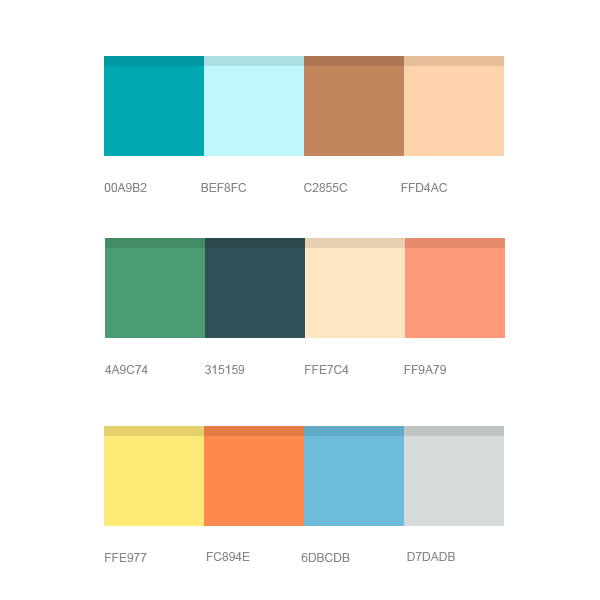
<style>
.page{position:relative;width:600px;height:600px;background:#ffffff}
.page>*{position:absolute;margin:0}
.t1{font:12px "ArialMT";color:#878787;text-transform:uppercase}
</style>
<div class="page">
<p class="t1" style="left:104px;top:183px;width:43px;height:9px">00A9B2</p>
<p class="t1" style="left:201px;top:183px;width:46px;height:9px">BEF8FC</p>
<p class="t1" style="left:304px;top:183px;width:44px;height:9px">c2855c</p>
<p class="t1" style="left:401px;top:183px;width:46px;height:9px">ffd4ac</p>
<p class="t1" style="left:105px;top:365px;width:43px;height:9px">4A9C74</p>
<p class="t1" style="left:205px;top:365px;width:40px;height:9px">315159</p>
<p class="t1" style="left:305px;top:365px;width:44px;height:9px">FFE7C4</p>
<p class="t1" style="left:404px;top:365px;width:42px;height:9px">ff9a79</p>
<p class="t1" style="left:105px;top:553px;width:42px;height:9px">ffe977</p>
<p class="t1" style="left:206px;top:552px;width:44px;height:9px">fc894e</p>
<p class="t1" style="left:301px;top:553px;width:49px;height:9px">6dbcdb</p>
<p class="t1" style="left:407px;top:552px;width:48px;height:9px">d7dadb</p>
</div>
